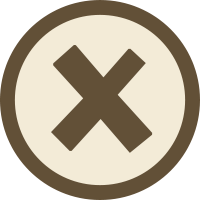
<style>
.page{position:relative;width:200px;height:200px;background:#f3ebd7}
.page>*{position:absolute;margin:0}
.t1{font:150.2px "TF2Build";color:#625037;font-weight:bold}
</style>
<div class="page">
<p class="t1" style="left:50px;top:44px;width:103px;height:109px">X</p>
</div>
